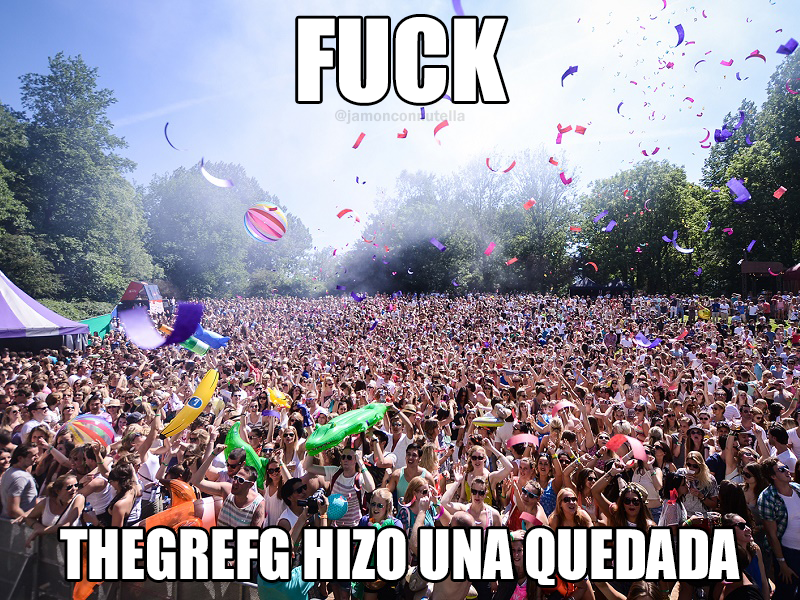
<style>
.page{position:relative;width:800px;height:600px}
.page>*{position:absolute;margin:0}
.t1{font:103.9px "Impact";color:#ffffff}
.t2{font:16.1px "FranklinGothic-Demi";color:#d1d7df}
.t3{font:63.1px "Impact";color:#ffffff;scale:0.94 1}
</style>
<div class="page">
<p class="t1" style="left:298px;top:17px;width:209px;height:86px">FUCK</p>
<p class="t2" style="left:335px;top:109px;width:130px;height:15px">@jamonconnutella</p>
<p class="t3" style="left:60px;top:528px;width:680px;height:57px">THEGREFG HIZO UNA QUEDADA</p>
</div>
